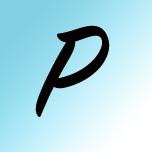
<style>
.page{position:relative;width:152px;height:152px}
.page>*{position:absolute;margin:0}
.t1{font:141.9px "SignPainter-HouseScript";color:#070101}
</style>
<div class="page">
<p class="t1" style="left:35px;top:25px;width:75px;height:92px">P</p>
</div>
